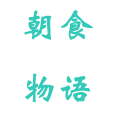
<style>
.page{position:relative;width:120px;height:120px;background:#ffffff}
.page>*{position:absolute;margin:0}
.t1{font:36px "STXinwei";color:#34c9b9;font-weight:bold}
</style>
<div class="page">
<p class="t1" style="left:24px;top:10px;width:69px;height:93px">朝食<br>物语</p>
</div>
